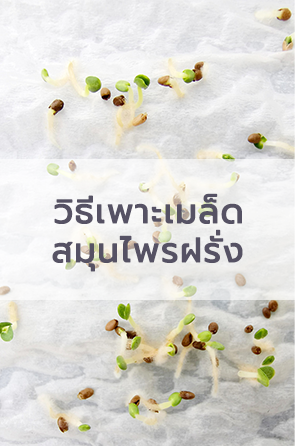
<style>
.page{position:relative;width:295px;height:446px}
.page>*{position:absolute;margin:0}
.t1{font:34px "Prompt-Regular";letter-spacing:0.02em;color:#565264;font-weight:bold}
</style>
<div class="page">
<p class="t1" style="left:54px;top:193px;width:188px;height:31px">วิธีเพาะเมล็ด</p>
<p class="t1" style="left:52px;top:229px;width:191px;height:43px">สมุนไพรฝรั่ง</p>
</div>
